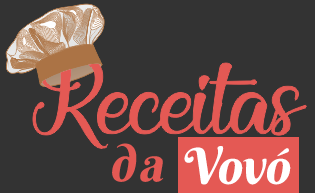
<style>
.page{position:relative;width:315px;height:193px;background:#333333}
.page>*{position:absolute;margin:0}
.t1{font:50px "BerkshireSwash-Regular";letter-spacing:0.075em;color:#e45954;font-style:italic}
.t2{font:50px "BerkshireSwash-Regular";color:#ffffff;font-style:italic}
</style>
<div class="page">
<p class="t1" style="left:112px;top:143px;width:52px;height:39px">da</p>
<p class="t2" style="left:184px;top:146px;width:107px;height:39px">Vovó</p>
</div>
